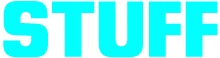
<style>
.page{position:relative;width:220px;height:58px;background:#00ffff}
.page>*{position:absolute;margin:0}
.t1{font:72px "NeographikMT";color:#00ffff}
</style>
<div class="page">
<p class="t1" style="left:3px;top:1px;width:215px;height:57px">STUFF</p>
</div>
